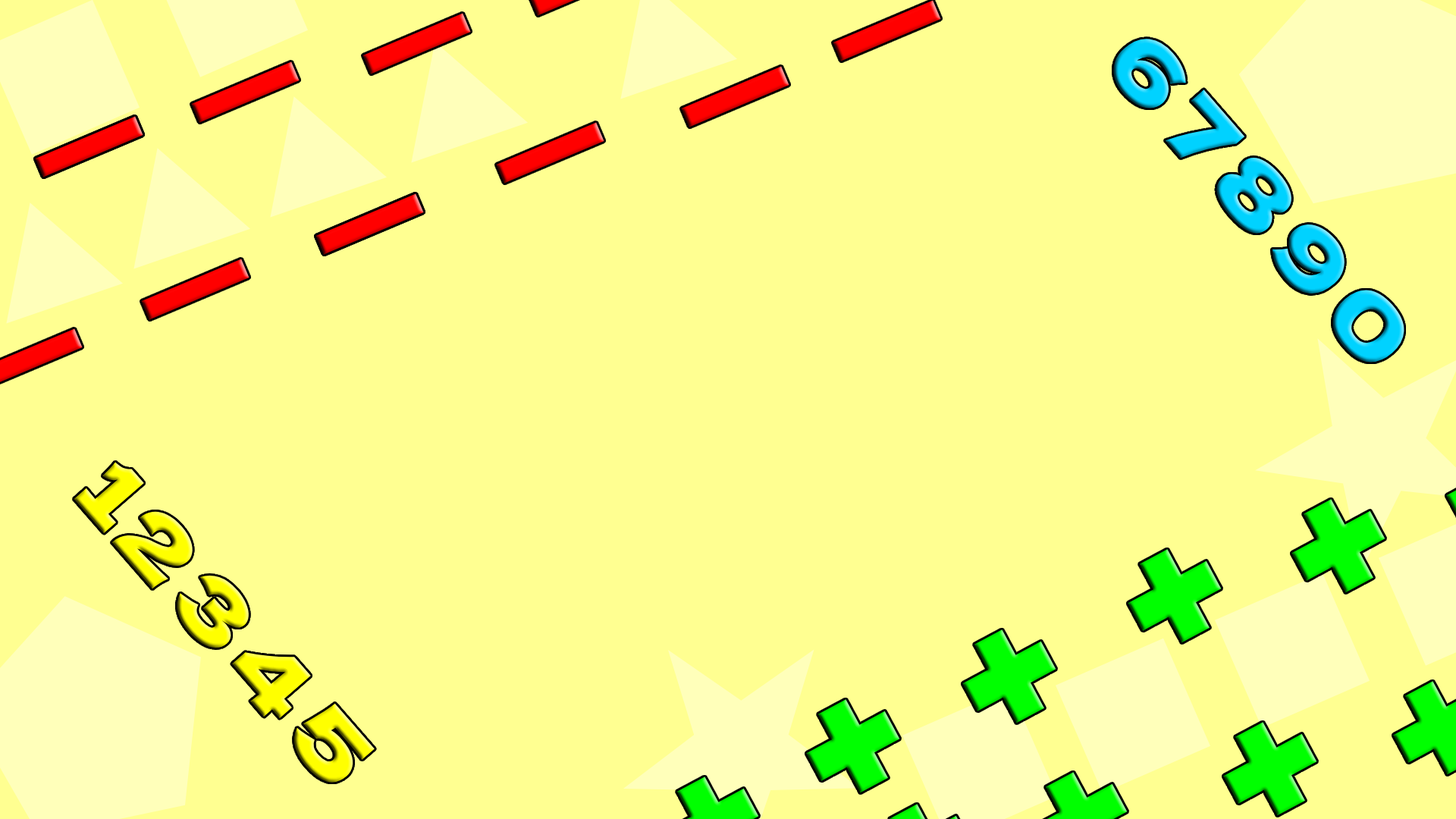
<style>
.page{position:relative;width:1456px;height:819px;background:#ffff91}
.page>*{position:absolute;margin:0}
.t1{font:103.1px "DelaGothicOne-Regular";color:#ff0000;scale:2.44 1}
.t2{font:85.7px "DelaGothicOne-Regular";letter-spacing:0.138em;color:#00d2ff}
.t3{font:85.7px "DelaGothicOne-Regular";letter-spacing:0.138em;color:#ffff00}
.t4{font:161.1px "DelaGothicOne-Regular";color:#00ff00}
</style>
<div class="page">
<p class="t1" style="left:833px;top:0px;width:108px;height:61px;rotate:-23deg">-</p>
<p class="t1" style="left:362px;top:13px;width:109px;height:61px;rotate:-23deg">-</p>
<p class="t2" style="left:1112px;top:37px;width:293px;height:326px;rotate:49deg">67890</p>
<p class="t1" style="left:191px;top:61px;width:109px;height:62px;rotate:-23deg">-</p>
<p class="t1" style="left:681px;top:66px;width:108px;height:61px;rotate:-23deg">-</p>
<p class="t1" style="left:35px;top:116px;width:108px;height:61px;rotate:-23deg">-</p>
<p class="t1" style="left:35px;top:116px;width:108px;height:61px;rotate:-23deg">-</p>
<p class="t1" style="left:496px;top:122px;width:108px;height:62px;rotate:-23deg">-</p>
<p class="t1" style="left:315px;top:193px;width:109px;height:62px;rotate:-23deg">-</p>
<p class="t1" style="left:315px;top:193px;width:109px;height:62px;rotate:-23deg">-</p>
<p class="t1" style="left:141px;top:259px;width:108px;height:61px;rotate:-23deg">-</p>
<p class="t3" style="left:74px;top:462px;width:301px;height:323px;rotate:49deg">12345</p>
<p class="t4" style="left:1291px;top:499px;width:94px;height:94px;rotate:-28deg">+</p>
<p class="t4" style="left:1128px;top:549px;width:94px;height:94px;rotate:-28deg">+</p>
<p class="t4" style="left:962px;top:629px;width:94px;height:94px;rotate:-28deg">+</p>
<p class="t4" style="left:806px;top:699px;width:94px;height:94px;rotate:-28deg">+</p>
<p class="t4" style="left:1223px;top:722px;width:94px;height:94px;rotate:-28deg">+</p>
</div>
